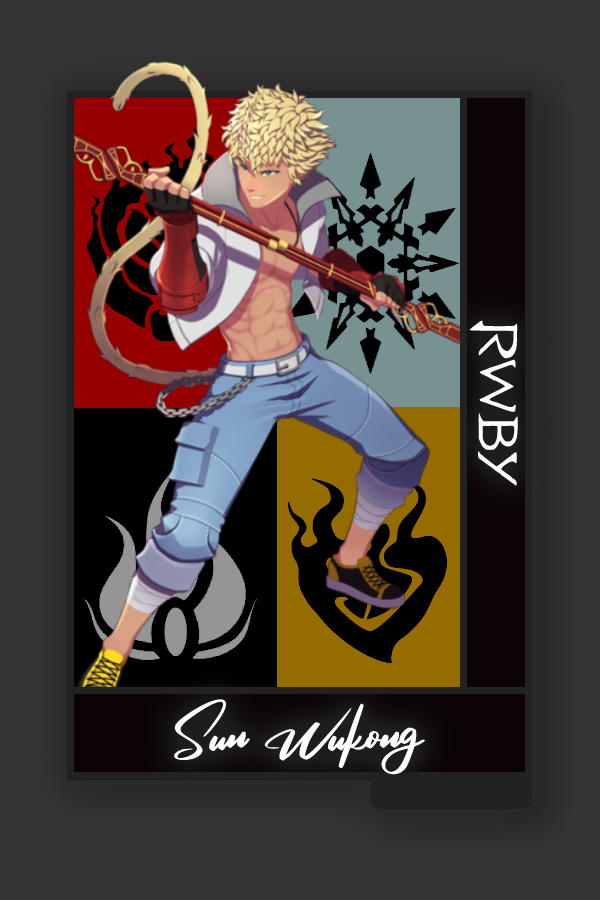
<style>
.page{position:relative;width:600px;height:900px;background:#333333}
.page>*{position:absolute;margin:0}
.t1{font:61.3px "RWBY_Style";color:#ffffff;scale:1.25 1}
.t2{font:76.6px "RosegaFREE";color:#ffffff;scale:0.91 1}
</style>
<div class="page">
<p class="t1" style="left:469px;top:320px;width:49px;height:166px;rotate:90deg">RWBY</p>
<p class="t2" style="left:164px;top:684px;width:262px;height:96px">Sun Wukong</p>
</div>
